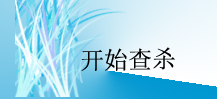
<style>
.page{position:relative;width:217px;height:99px}
.page>*{position:absolute;margin:0}
.t1{font:24px "SimSun";color:#000000}
</style>
<div class="page">
<p class="t1" style="left:81px;top:47px;width:94px;height:24px">开始查杀</p>
</div>
